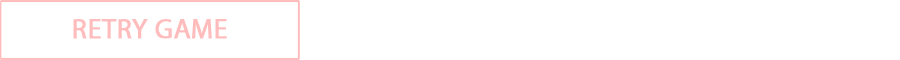
<style>
.page{position:relative;width:900px;height:60px;background:#ffffff}
.page>*{position:absolute;margin:0}
.t1{font:27.8px "MyriadPro-Regular";color:#ffbcbc;font-weight:bold}
</style>
<div class="page">
<p class="t1" style="left:73px;top:19px;width:154px;height:20px">RETRY GAME</p>
</div>
